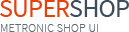
<style>
.page{position:relative;width:129px;height:32px;background:#ffffff}
.page>*{position:absolute;margin:0}
.t1{font:26px "SourceSansPro-Regular";letter-spacing:-0.03em;color:#e6400c}
.t2{font:26px "SourceSansPro-Regular";letter-spacing:-0.03em;color:#3e4d5c}
.t3{font:12px "SourceSansPro-ExtraLight";letter-spacing:0.02em;color:#616b76}
</style>
<div class="page">
<p class="t1" style="left:0px;top:0px;width:129px;height:17px">SUPER<span class="t2">SHOP</span></p>
<p class="t3" style="left:1px;top:24px;width:97px;height:8px">METRONIC SHOP UI</p>
</div>
